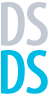
<style>
.page{position:relative;width:48px;height:96px;background:#ffffff}
.page>*{position:absolute;margin:0}
.t1{font:64px "MyriadPro-Cond";color:#c2c9d3;font-weight:bold}
.t2{font:64px "MyriadPro-Cond";color:#00bce4;font-weight:bold}
</style>
<div class="page">
<p class="t1" style="left:1px;top:2px;width:47px;height:44px;text-align:center">DS<br>DS</p>
<p class="t2" style="left:1px;top:50px;width:47px;height:44px;text-align:center">DS<br>DS</p>
</div>
